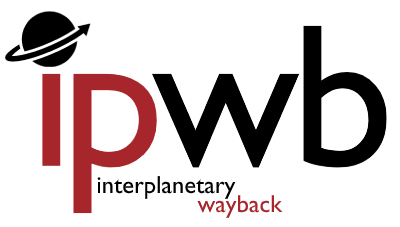
<style>
.page{position:relative;width:400px;height:227px;background:#ffffff}
.page>*{position:absolute;margin:0}
.t1{font:205.6px "GillSans";letter-spacing:-0.06em;color:#a7262b}
.t2{font:205.6px "GillSans";letter-spacing:-0.04em;color:#000000}
.t3{font:205.6px "GillSans";letter-spacing:-0.02em;color:#000000}
.t4{font:24.7px/18.5px "GillSans";color:#000000}
.t5{font:24.7px/18.5px "GillSans";color:#a7262b}
</style>
<div class="page">
<p class="t1" style="left:40px;top:25px;width:347px;height:189px">ip<span class="t2">w</span><span class="t3">b</span></p>
<p class="t4" style="left:97px;top:176px;width:186px;height:42px">interplanetary<br>               <span class="t5">wayback</span></p>
</div>
